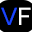
<style>
.page{position:relative;width:32px;height:32px;background:#000000}
.page>*{position:absolute;margin:0}
.t1{font:24px "ArialMT";color:#1b46ff}
.t2{font:24px "ArialMT";color:#ffffff}
</style>
<div class="page">
<p class="t1" style="left:1px;top:7px;width:16px;height:18px">V</p>
<p class="t2" style="left:19px;top:7px;width:12px;height:18px">F</p>
</div>
